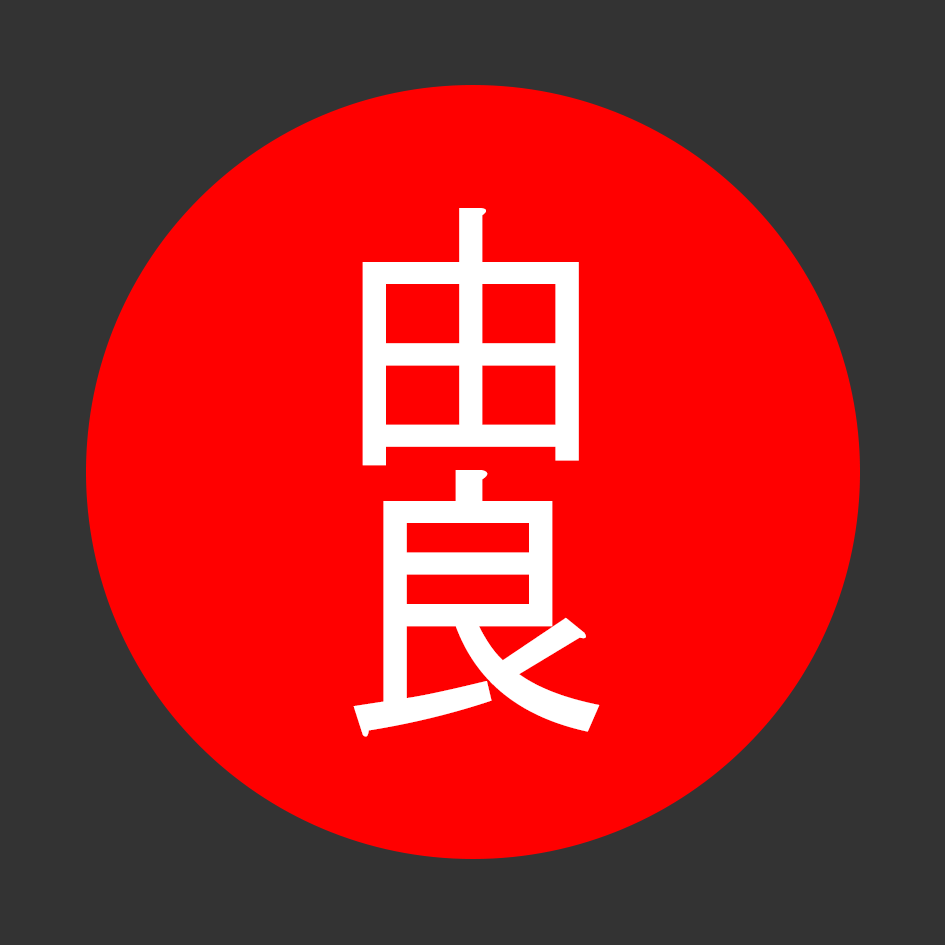
<style>
.page{position:relative;width:945px;height:945px;background:#ff0000}
.page>*{position:absolute;margin:0}
.t1{font:293.5px "MS-Gothic";letter-spacing:-0.1em;color:#ffffff}
</style>
<div class="page">
<p class="t1" style="left:353px;top:208px;width:247px;height:529px">由良</p>
</div>
